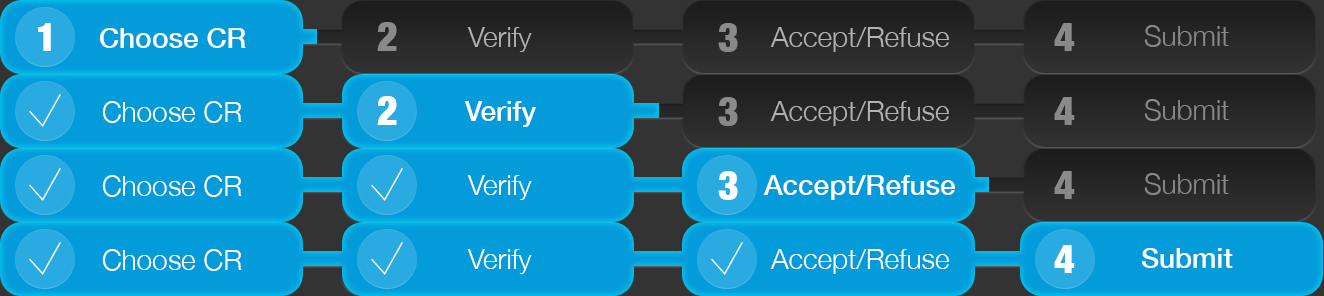
<style>
.page{position:relative;width:1324px;height:296px;background:#049bda}
.page>*{position:absolute;margin:0}
.t1{font:40px "HelveticaNeue-CondensedBlack";color:#ffffff}
.t2{font:28px "HelveticaNeue-Medium";color:#ffffff}
.t3{font:40px "HelveticaNeue-CondensedBlack";color:#8a8a8a}
.t4{font:28px "HelveticaNeue-Light";color:#b1b1b1}
.t5{font:40px "HelveticaNeue-CondensedBlack";color:#898989}
.t6{font:28px "HelveticaNeue-Light";color:#898989}
.t7{font:28px "HelveticaNeue-Light";color:#ffffff}
</style>
<div class="page">
<p class="t1" style="left:38px;top:23px;width:13px;height:28px">1</p>
<p class="t2" style="left:100px;top:28px;width:146px;height:20px">Choose CR</p>
<p class="t3" style="left:377px;top:22px;width:20px;height:29px">2</p>
<p class="t4" style="left:467px;top:27px;width:65px;height:25px">Verify</p>
<p class="t5" style="left:718px;top:23px;width:20px;height:29px">3</p>
<p class="t4" style="left:770px;top:27px;width:179px;height:25px">Accept/Refuse</p>
<p class="t5" style="left:1054px;top:23px;width:21px;height:28px">4</p>
<p class="t6" style="left:1144px;top:25px;width:85px;height:22px">Submit</p>
<p class="t7" style="left:102px;top:101px;width:140px;height:22px">Choose CR</p>
<p class="t1" style="left:377px;top:96px;width:20px;height:29px">2</p>
<p class="t2" style="left:464px;top:101px;width:72px;height:26px">Verify</p>
<p class="t5" style="left:718px;top:97px;width:20px;height:29px">3</p>
<p class="t4" style="left:770px;top:101px;width:179px;height:25px">Accept/Refuse</p>
<p class="t5" style="left:1054px;top:97px;width:21px;height:28px">4</p>
<p class="t6" style="left:1144px;top:99px;width:85px;height:22px">Submit</p>
<p class="t1" style="left:718px;top:171px;width:20px;height:29px">3</p>
<p class="t5" style="left:1054px;top:171px;width:21px;height:28px">4</p>
<p class="t6" style="left:1144px;top:173px;width:85px;height:22px">Submit</p>
<p class="t7" style="left:102px;top:175px;width:140px;height:22px">Choose CR</p>
<p class="t7" style="left:467px;top:175px;width:65px;height:25px">Verify</p>
<p class="t2" style="left:763px;top:175px;width:192px;height:25px">Accept/Refuse</p>
<p class="t1" style="left:1054px;top:245px;width:21px;height:28px">4</p>
<p class="t7" style="left:102px;top:249px;width:140px;height:22px">Choose CR</p>
<p class="t7" style="left:467px;top:249px;width:65px;height:25px">Verify</p>
<p class="t7" style="left:770px;top:249px;width:179px;height:25px">Accept/Refuse</p>
<p class="t2" style="left:1141px;top:248px;width:92px;height:20px">Submit</p>
</div>
